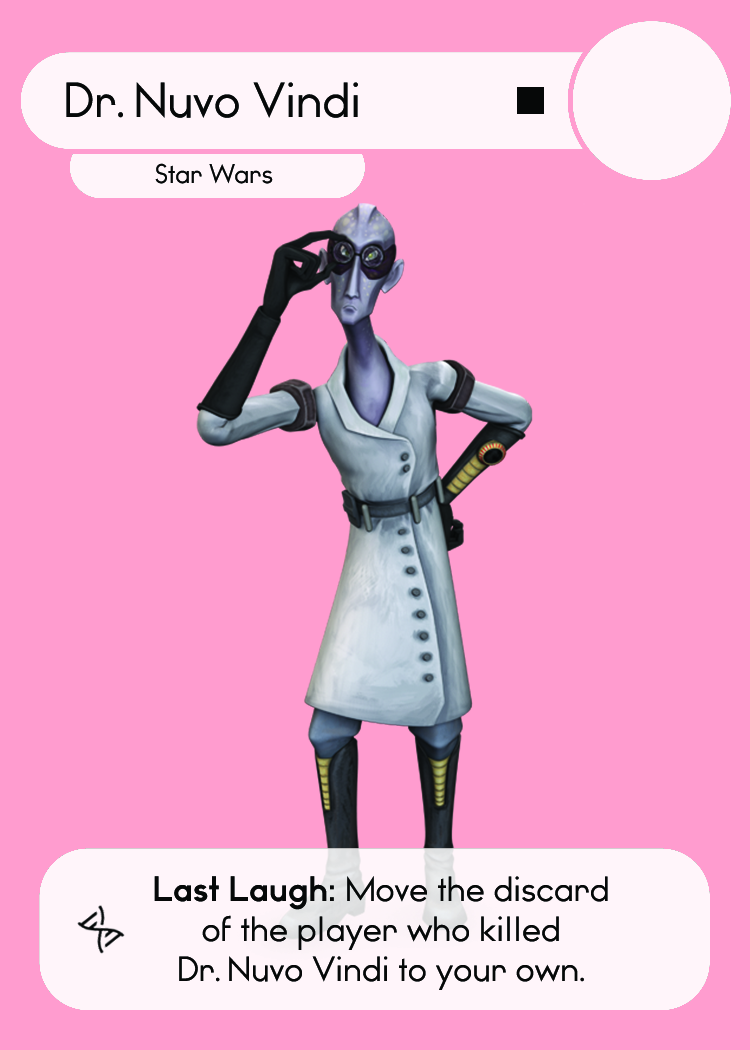
<style>
.page{position:relative;width:750px;height:1050px;background:#ff9ccf}
.page>*{position:absolute;margin:0}
.t1{font:46.7px "WatchwordRegularDemo";color:#060808}
.t2{font:46.7px "Dosis-Medium";color:#060808}
.t3{font:25.5px "WatchwordRegularDemo";color:#060808}
.t4{font:33.3px "WatchwordRegularDemo";color:#060808}
.t5{font:33.3px "WatchwordBoldDemo";color:#060808}
.t6{font:33.3px "Dosis-Medium";color:#060808}
</style>
<div class="page">
<p class="t1" style="left:66px;top:82px;width:292px;height:36px">Dr<span class="t2">. </span>Nuvo Vindi</p>
<p class="t3" style="left:155px;top:163px;width:118px;height:21px">Star Wars</p>
<p class="t4" style="left:154px;top:876px;width:454px;height:114px;text-align:center"><span class="t5">Last Laugh: </span>Move the discard<br>of the player who killed<br>Dr<span class="t6">. </span>Nuvo Vindi to your own<span class="t6">.</span></p>
</div>
